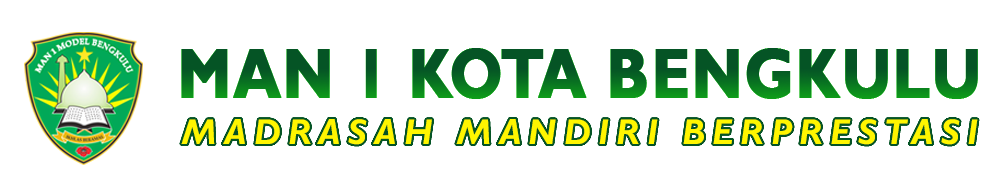
<style>
.page{position:relative;width:1000px;height:196px;background:#ffffff}
.page>*{position:absolute;margin:0}
.t1{font:71.2px "GillSansMT-Bold";letter-spacing:0.01em;font-weight:bold;scale:0.84 1}
.t2{font:71.2px "GillSansMT-Bold";letter-spacing:0.01em;color:#055425;font-weight:bold;scale:0.84 1}
.t3{font:36px "GillSansMT-BoldItalic";letter-spacing:0.2em;color:#fff600}
</style>
<div class="page">
<p class="t1" style="left:181px;top:48px;width:797px;height:51px">MAN 1 KOTA BENGKULU</p>
<p class="t2" style="left:181px;top:48px;width:797px;height:51px">MAN 1 KOTA BENGKULU</p>
<p class="t3" style="left:181px;top:119px;width:797px;height:26px">MADRASAH MANDIRI BERPRESTASI</p>
</div>
